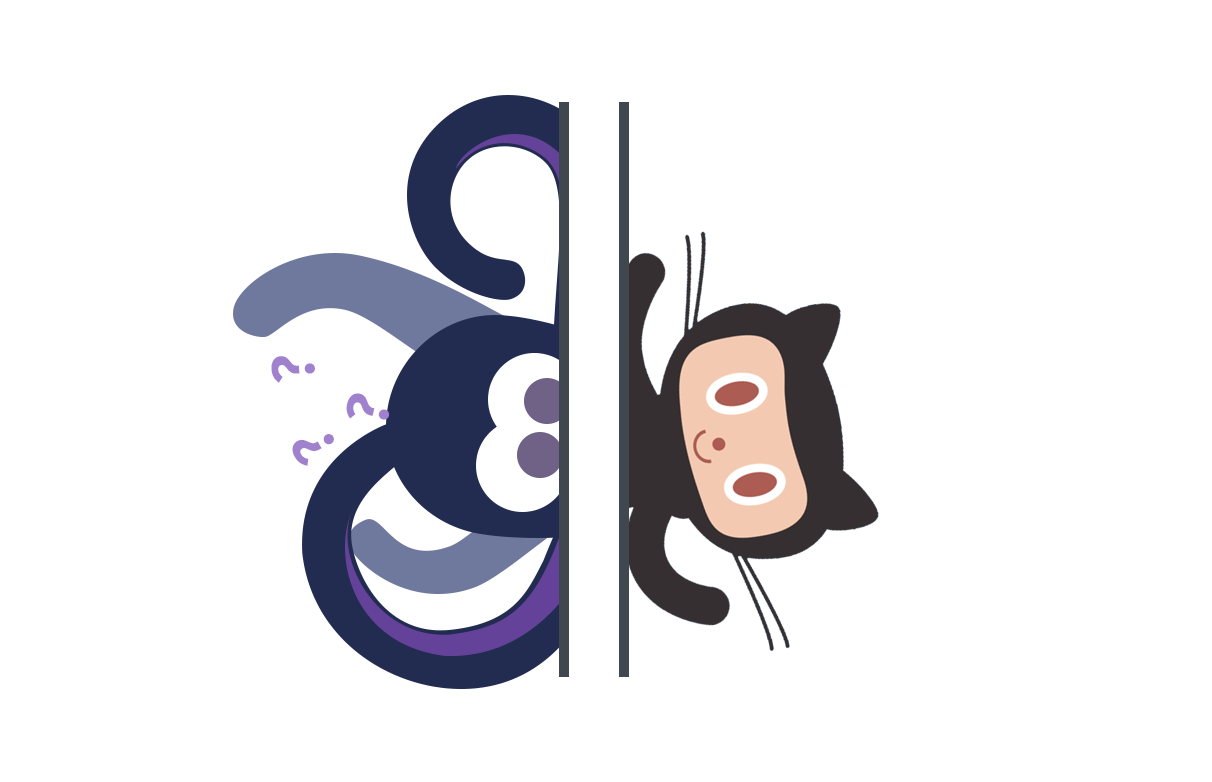
<style>
.page{position:relative;width:1212px;height:782px;background:#ffffff}
.page>*{position:absolute;margin:0}
.t1{font:60px "FiraSans-SemiBold";letter-spacing:0.1em;color:#a081ce}
</style>
<div class="page">
<p class="t1" style="left:271px;top:356px;width:44px;height:27px;rotate:-94deg">?</p>
<p class="t1" style="left:346px;top:393px;width:43px;height:27px;rotate:-77deg">?</p>
<p class="t1" style="left:292px;top:434px;width:42px;height:32px;rotate:-121deg">?</p>
</div>
